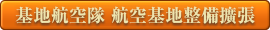
<style>
.page{position:relative;width:270px;height:30px}
.page>*{position:absolute;margin:0}
.t1{font:18px "RyuminPr6N-ExBold";color:#efe5ae}
</style>
<div class="page">
<p class="t1" style="left:15px;top:6px;width:240px;height:18px">基地航空隊 航空基地整備擴張</p>
</div>
